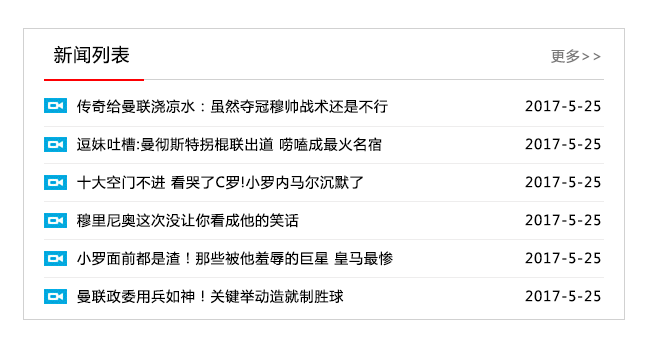
<style>
.page{position:relative;width:650px;height:348px;background:#ffffff}
.page>*{position:absolute;margin:0}
.t1{font:18px "MicrosoftYaHei";letter-spacing:0.06em;color:#000000}
.t2{font:14px "MicrosoftYaHei";letter-spacing:0.06em;color:#7a7979}
.t3{font:14px/38px "MicrosoftYaHei";letter-spacing:0.06em;color:#000000}
</style>
<div class="page">
<p class="t1" style="left:54px;top:45px;width:75px;height:19px">新闻列表</p>
<p class="t2" style="left:551px;top:49px;width:50px;height:14px">更多&gt;&gt;</p>
<p class="t3" style="left:77px;top:99px;width:316px;height:205px">传奇给曼联浇凉水：虽然夺冠穆帅战术还是不行<br>逗妹吐槽:曼彻斯特拐棍联出道 唠嗑成最火名宿<br>十大空门不进 看哭了C罗!小罗内马尔沉默了<br>穆里尼奥这次没让你看成他的笑话<br>小罗面前都是渣！那些被他羞辱的巨星 皇马最惨<br>曼联政委用兵如神！关键举动造就制胜球</p>
<p class="t3" style="left:525px;top:100px;width:76px;height:202px">2017-5-25<br>2017-5-25<br>2017-5-25<br>2017-5-25<br>2017-5-25<br>2017-5-25</p>
</div>
